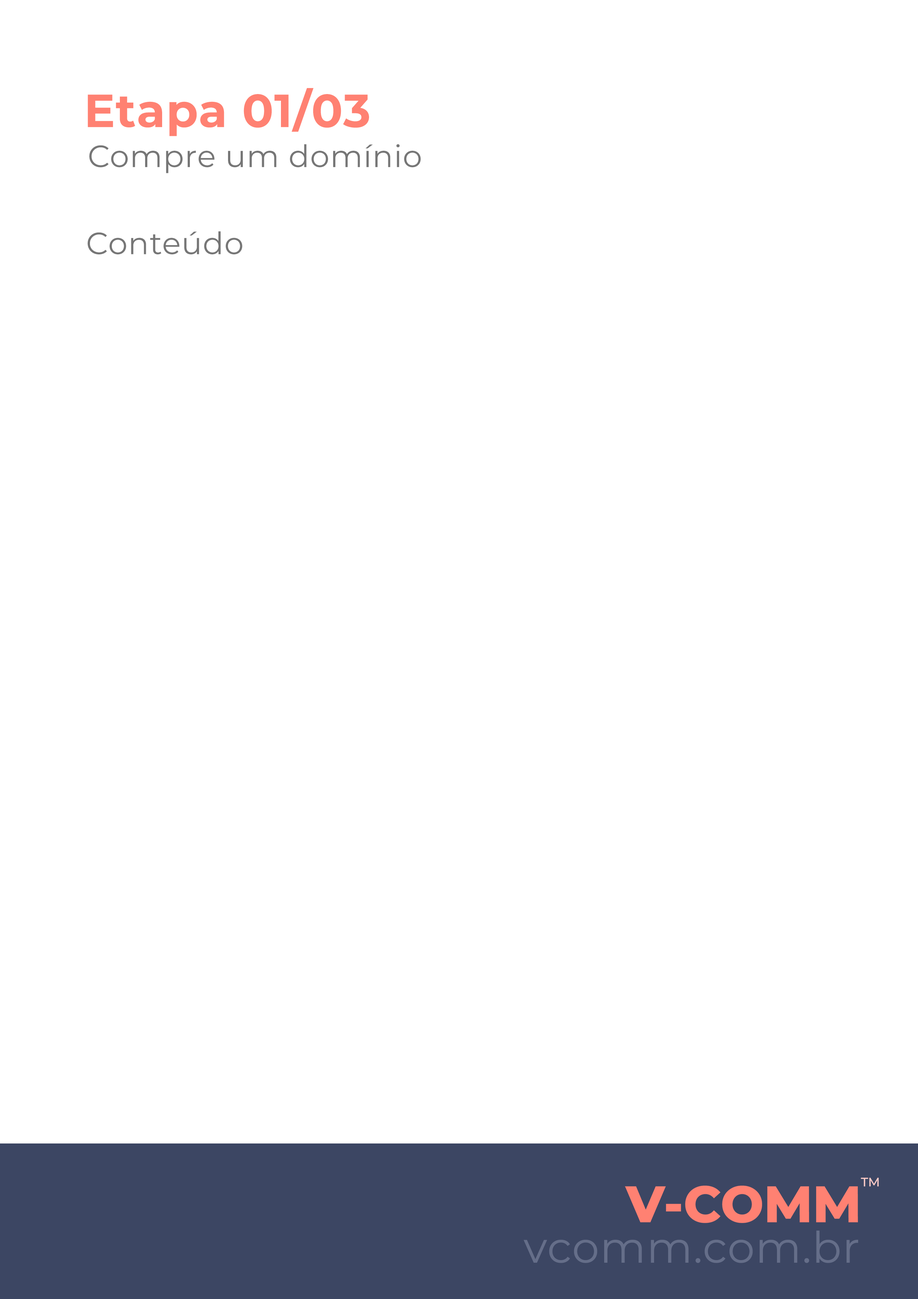
<style>
.page{position:relative;width:918px;height:1299px;background:#ffffff}
.page>*{position:absolute;margin:0}
.t1{font:46.3px "Montserrat-Bold";letter-spacing:0.02em;color:#ff8172}
.t2{font:30.9px "Montserrat-Regular";letter-spacing:0.02em;color:#767676}
.t3{font:43.2px "Montserrat-Regular";letter-spacing:0.02em;color:#656e89}
</style>
<div class="page">
<p class="t1" style="left:88px;top:88px;width:281px;height:48px">Etapa 01/03</p>
<p class="t2" style="left:89px;top:144px;width:332px;height:29px">Compre um domínio</p>
<p class="t2" style="left:87px;top:231px;width:155px;height:23px">Conteúdo</p>
<p class="t3" style="left:523px;top:1230px;width:336px;height:33px">vcomm.com.br</p>
</div>
